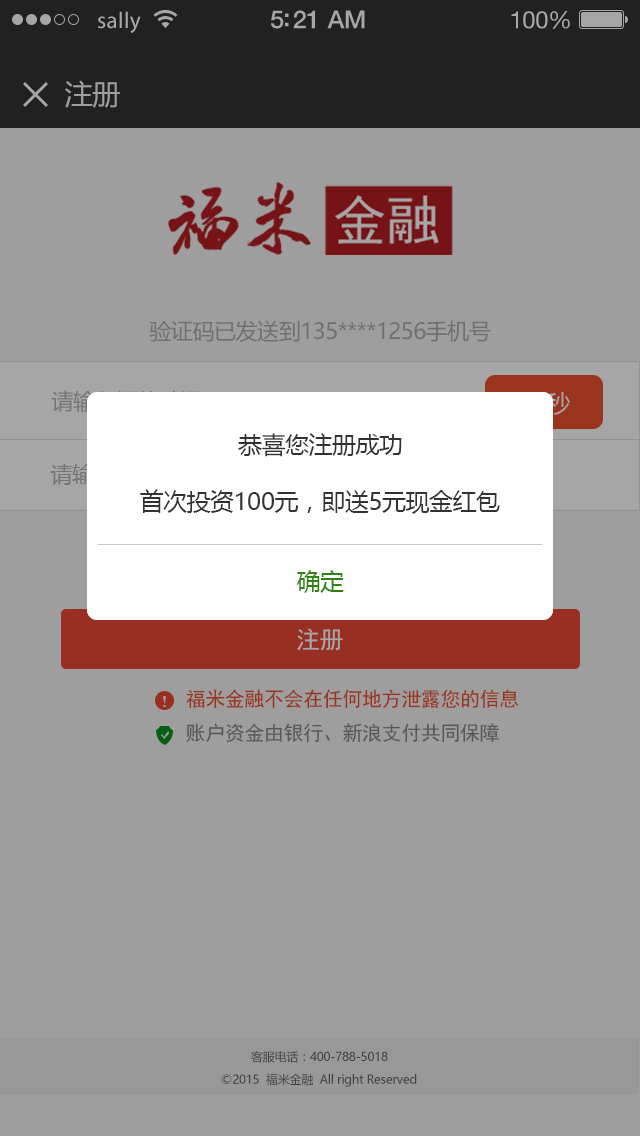
<style>
.page{position:relative;width:640px;height:1136px;background:#9e9e9e}
.page>*{position:absolute;margin:0}
.t1{font:23px "MyriadPro-Regular";letter-spacing:0.02em;color:#a6a6a6}
.t2{font:25px "HelveticaNeue-Medium";letter-spacing:-0.02em;color:#a6a6a6}
.t3{font:24px "HelveticaNeue";letter-spacing:-0.02em;color:#a6a6a6}
.t4{font:28px "MicrosoftYaHei";letter-spacing:-0.02em;color:#9e9e9e}
.t5{font:22px "MicrosoftYaHei";letter-spacing:-0.02em;color:#707070}
.t6{font:24px "MicrosoftYaHei";letter-spacing:-0.02em;color:#323232}
.t7{font:24px "MicrosoftYaHei";letter-spacing:-0.02em;color:#2f820e}
.t8{font:24px "SimHei";letter-spacing:-0.02em;color:#a6a6a6}
.t9{font:20px "SimHei";letter-spacing:-0.02em;color:#98351c}
.t10{font:20px "SimHei";letter-spacing:-0.02em;color:#585858}
.t11{font:12px "MicrosoftYaHei";letter-spacing:-0.02em;color:#414141}
</style>
<div class="page">
<p class="t1" style="left:98px;top:11px;width:43px;height:22px">sally</p>
<p class="t2" style="left:271px;top:10px;width:94px;height:19px">5:21 AM</p>
<p class="t3" style="left:511px;top:11px;width:59px;height:18px">100%</p>
<p class="t4" style="left:65px;top:80px;width:55px;height:28px">注册</p>
<p class="t5" style="left:149px;top:320px;width:342px;height:22px">验证码已发送到135****1256手机号</p>
<p class="t6" style="left:238px;top:433px;width:164px;height:24px">恭喜您注册成功</p>
<p class="t6" style="left:140px;top:489px;width:360px;height:25px">首次投资100元，即送5元现金红包</p>
<p class="t7" style="left:296px;top:570px;width:48px;height:23px">确定</p>
<p class="t8" style="left:297px;top:628px;width:46px;height:23px">注册</p>
<p class="t9" style="left:186px;top:689px;width:333px;height:20px">福米金融不会在任何地方泄露您的信息</p>
<p class="t10" style="left:186px;top:723px;width:313px;height:20px">账户资金由银行、新浪支付共同保障</p>
<p class="t11" style="left:251px;top:1051px;width:137px;height:12px">客服电话：400-788-5018</p>
<p class="t11" style="left:221px;top:1073px;width:196px;height:14px">©2015  福米金融  All right Reserved</p>
</div>
